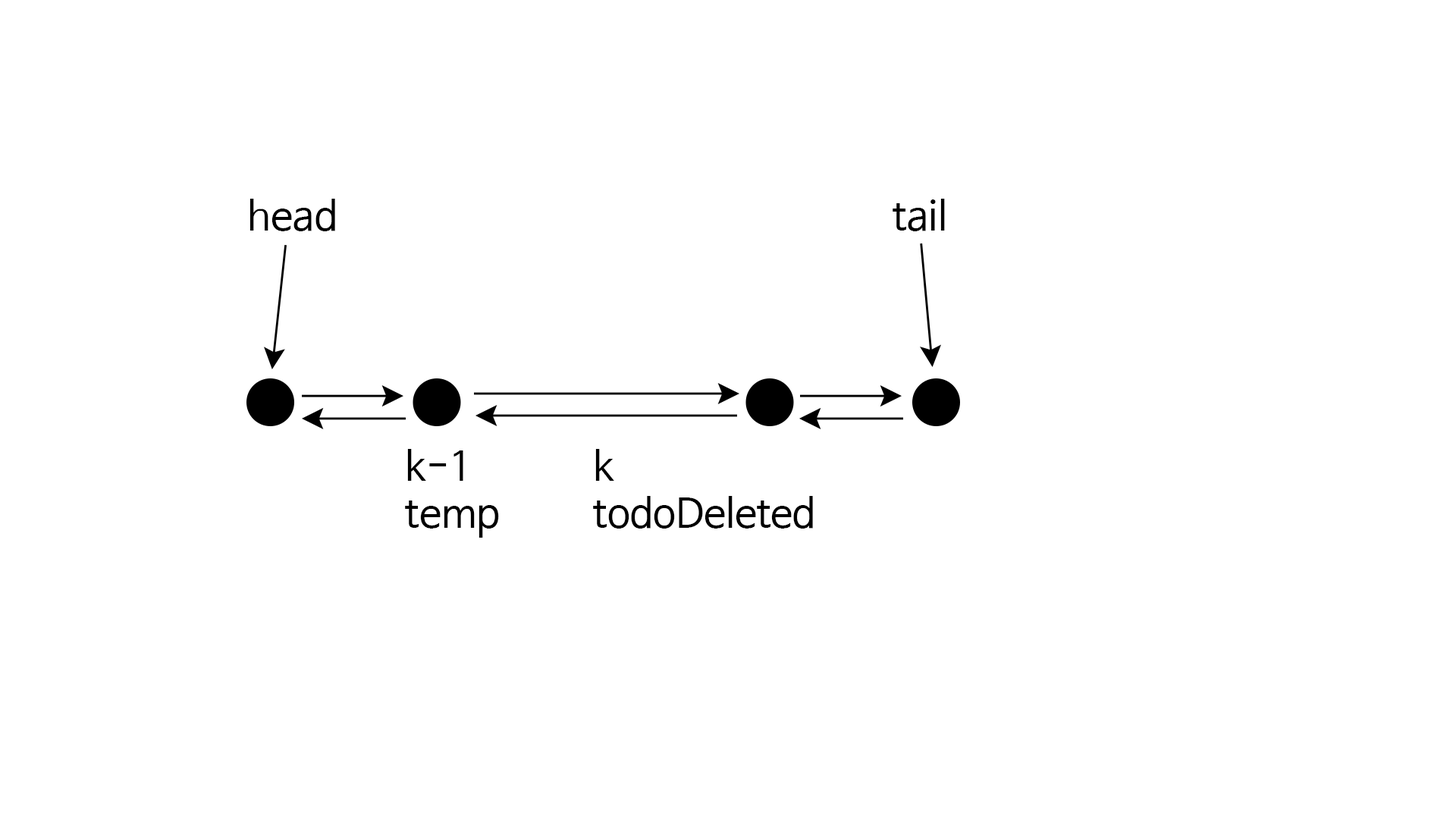
<style>
.page{position:relative;width:1456px;height:819px;background:#ffffff}
.page>*{position:absolute;margin:0}
.t1{font:39.5px "NanumBarunGothic";color:#000000}
</style>
<div class="page">
<p class="t1" style="left:249px;top:199px;width:86px;height:32px">head</p>
<p class="t1" style="left:893px;top:199px;width:52px;height:32px">tail</p>
<p class="t1" style="left:405px;top:449px;width:94px;height:89px">k-1<br>temp</p>
<p class="t1" style="left:593px;top:449px;width:220px;height:80px">k<br>todoDeleted</p>
</div>
